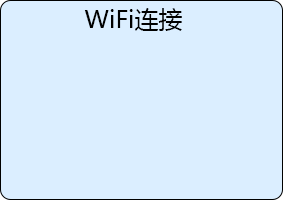
<style>
.page{position:relative;width:283px;height:200px;background:#dbeeff}
.page>*{position:absolute;margin:0}
.t1{font:24px "MicrosoftYaHei";color:#000000}
.t2{font:24px "MicrosoftYaHei";color:#000000;font-variant:small-caps}
</style>
<div class="page">
<p class="t1" style="left:84px;top:8px;width:98px;height:23px"><span class="t2">W</span>iFi<span class="t2">连接</span></p>
</div>
